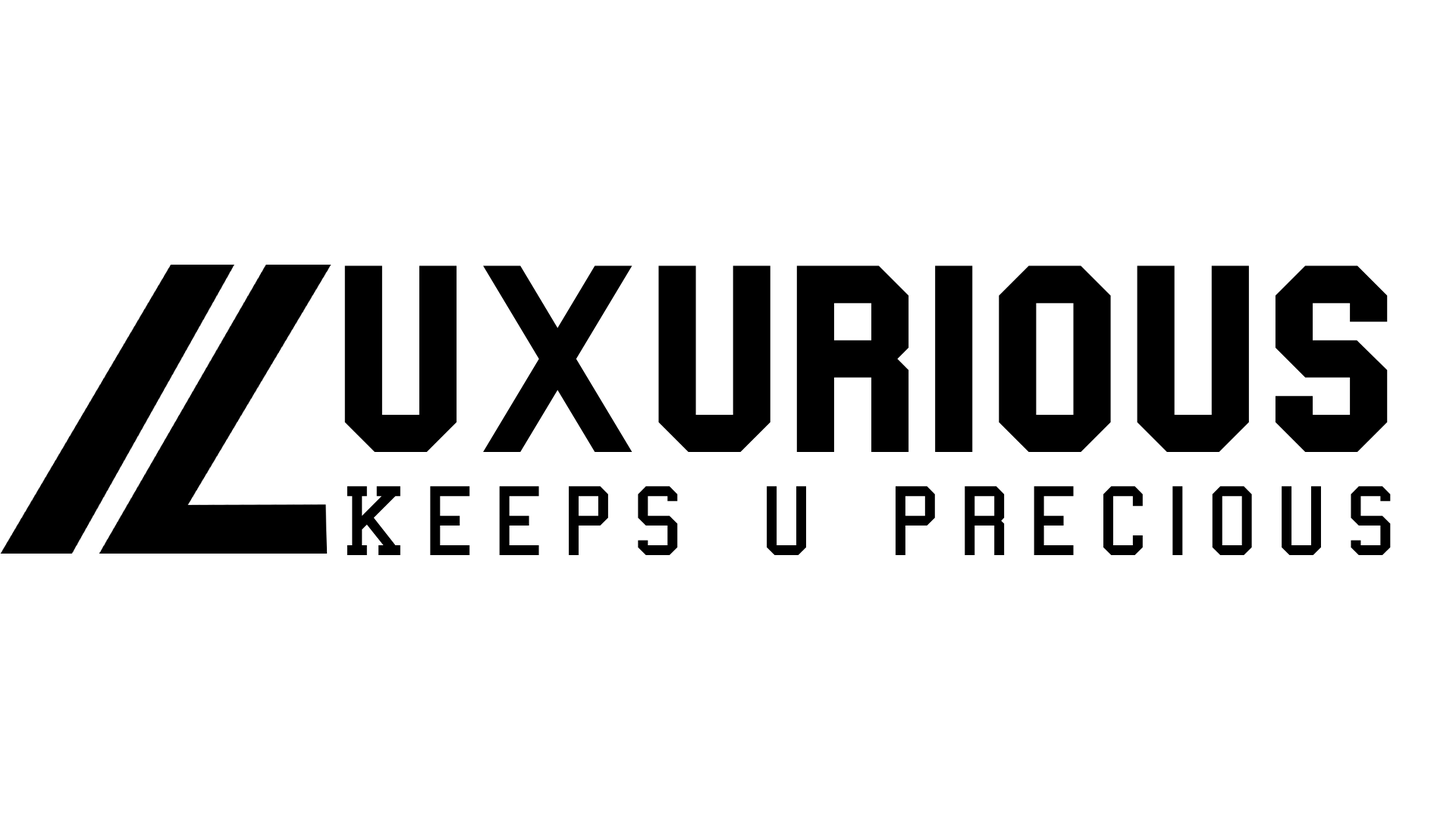
<style>
.page{position:relative;width:1456px;height:819px;background:#ffffff}
.page>*{position:absolute;margin:0}
.t1{font:272.3px "CollegeBold";color:#000000}
.t2{font:100.6px "College";letter-spacing:0.2em;color:#000000}
</style>
<div class="page">
<p class="t1" style="left:344px;top:265px;width:1044px;height:187px">uxurious</p>
<p class="t2" style="left:347px;top:486px;width:1044px;height:69px">Keeps u precious</p>
</div>
